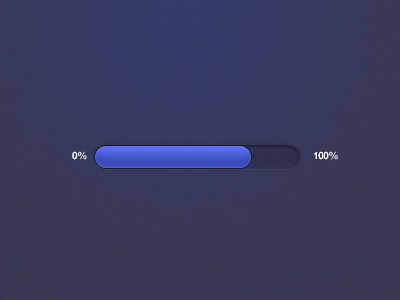
<style>
.page{position:relative;width:400px;height:300px}
.page>*{position:absolute;margin:0}
.t1{font:10px "HelveticaNeue-Bold";letter-spacing:-0.04em;color:#ffffff}
</style>
<div class="page">
<p class="t1" style="left:72px;top:151px;width:15px;height:9px">0%</p>
<p class="t1" style="left:313px;top:151px;width:25px;height:9px">100%</p>
</div>
